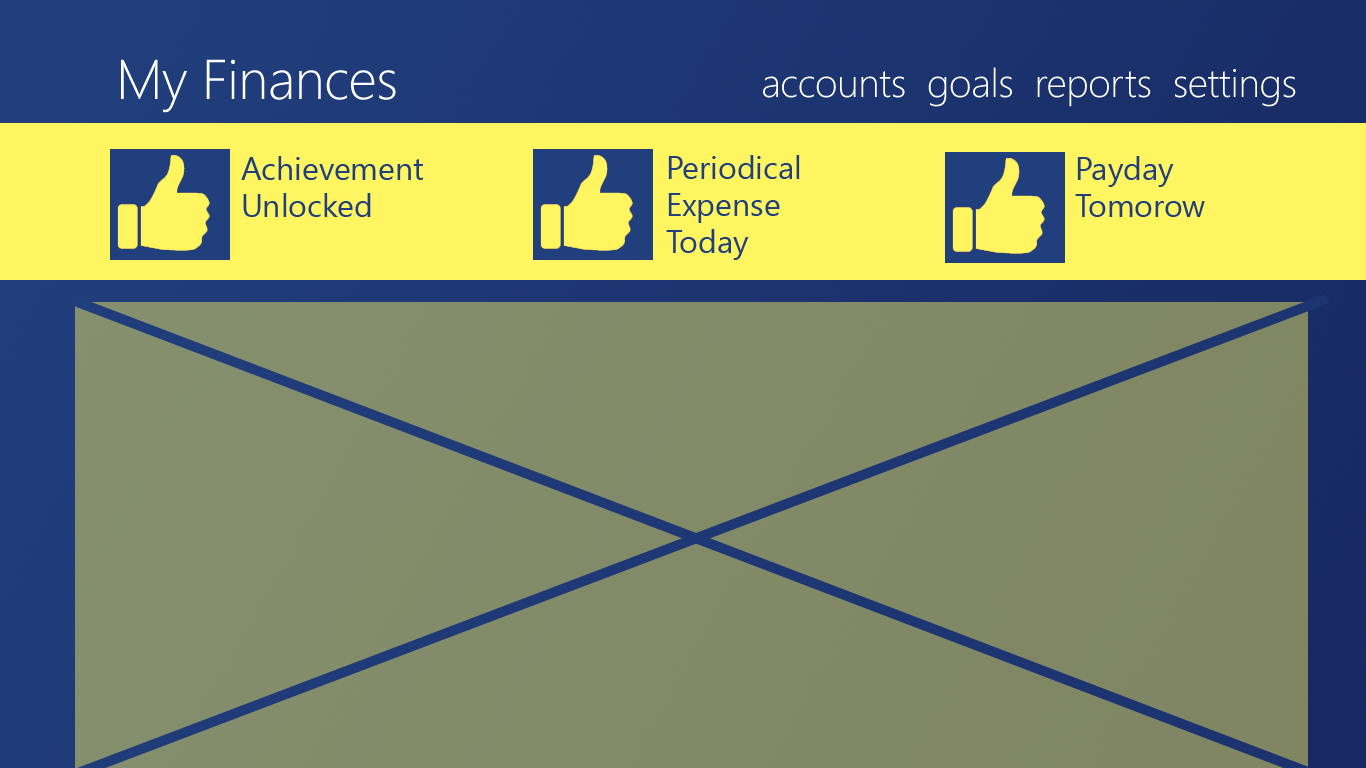
<style>
.page{position:relative;width:1366px;height:768px}
.page>*{position:absolute;margin:0}
.t1{font:56px "SegoeUI-Light";letter-spacing:-0.01em;color:#ffffff}
.t2{font:40px "SegoeUI-Light";letter-spacing:-0.01em;color:#ffffff}
.t3{font:32px/18.7px "SegoeUI";color:#213f7d}
</style>
<div class="page">
<p class="t1" style="left:121px;top:59px;width:275px;height:54px">My Finances</p>
<p class="t2" style="left:763px;top:67px;width:533px;height:40px">accounts  goals  reports  settings</p>
<p class="t3" style="left:241px;top:156px;width:182px;height:61px">Achievement<br><br>Unlocked</p>
<p class="t3" style="left:666px;top:155px;width:134px;height:105px">Periodical<br><br>Expense<br><br>Today</p>
<p class="t3" style="left:1075px;top:156px;width:130px;height:61px">Payday<br><br>Tomorow</p>
</div>
